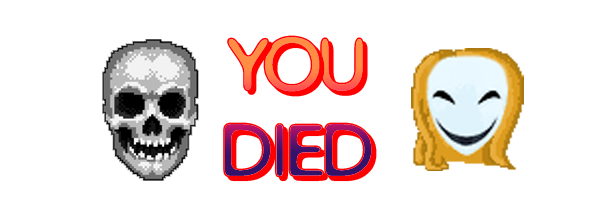
<style>
.page{position:relative;width:600px;height:218px;background:#ffffff}
.page>*{position:absolute;margin:0}
.t1{font:72px "DistroBev";letter-spacing:-0.06em;color:#fe0000;text-transform:uppercase}
</style>
<div class="page">
<p class="t1" style="left:223px;top:35px;width:154px;height:147px;text-align:center">You<br>Died</p>
</div>
